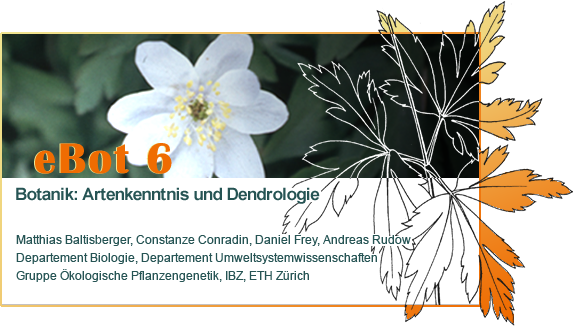
<style>
.page{position:relative;width:573px;height:326px;background:#ffffff}
.page>*{position:absolute;margin:0}
.t1{font:44px "BritannicBold";letter-spacing:0.05em;color:#ef6c02}
.t2{font:17px "Arial-BoldMT";letter-spacing:-0.025em;color:#265454}
.t3{font:12px/18px "ArialMT";color:#265454}
</style>
<div class="page">
<p class="t1" style="left:34px;top:143px;width:137px;height:31px">eBot 6</p>
<p class="t1" style="left:35px;top:143px;width:137px;height:31px">eBot 6</p>
<p class="t2" style="left:16px;top:187px;width:304px;height:17px">Botanik: Artenkenntnis und Dendrologie</p>
<p class="t3" style="left:16px;top:235px;width:395px;height:47px">Matthias Baltisberger, Constanze Conradin, Daniel Frey, Andreas Rudow<br>Departement Biologie, Departement Umweltsystemwissenschaften<br>Gruppe Ökologische Pflanzengenetik, IBZ, ETH Zürich</p>
</div>
